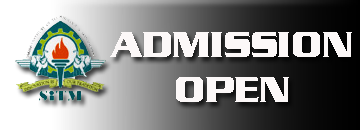
<style>
.page{position:relative;width:360px;height:130px}
.page>*{position:absolute;margin:0}
.t1{font:37.7px "SerpentineD-Bold";color:#fcf8f8}
</style>
<div class="page">
<p class="t1" style="left:110px;top:32px;width:242px;height:70px;text-align:center">ADMISSION <br>OPEN</p>
</div>
